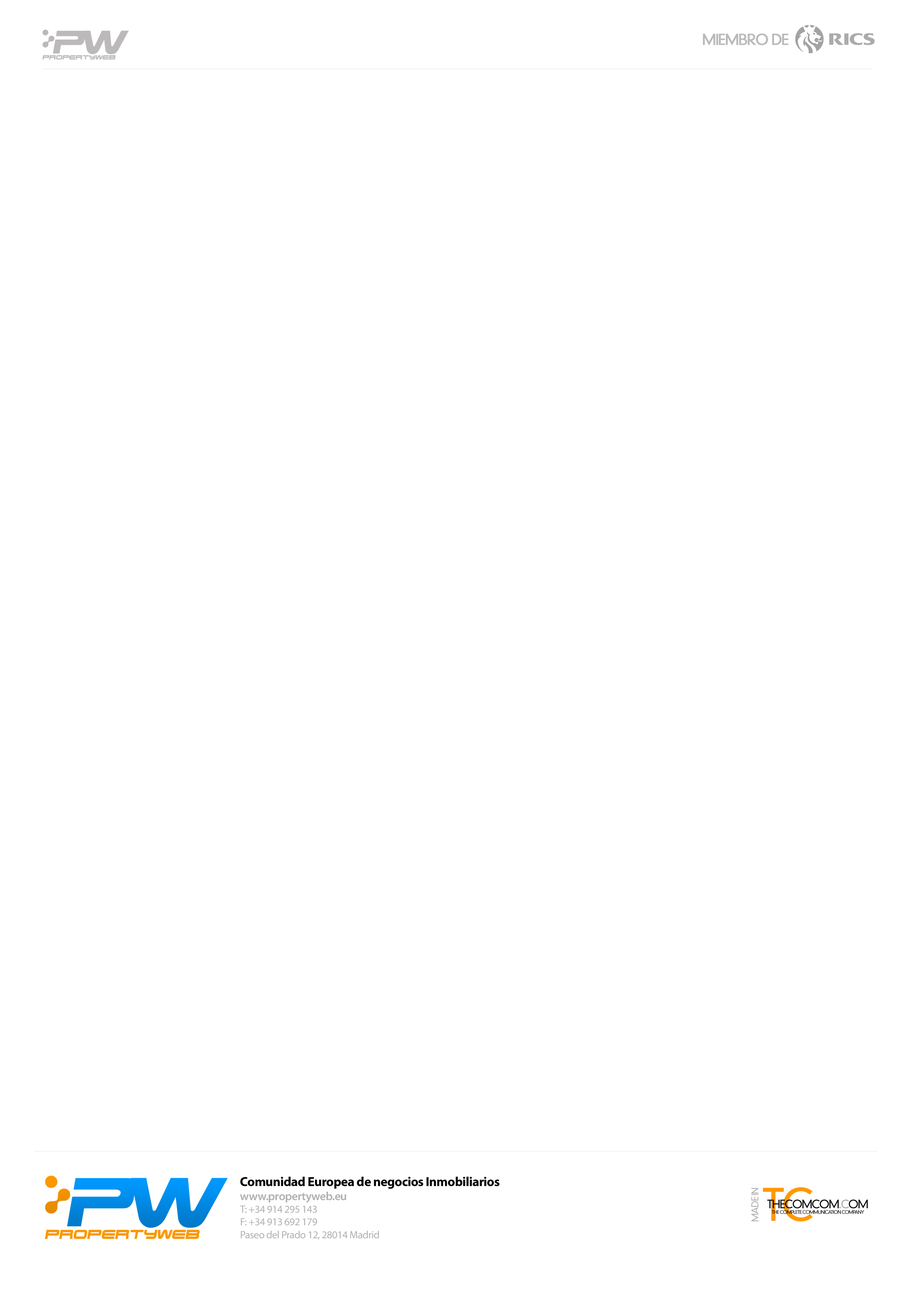
<style>
.page{position:relative;width:918px;height:1299px;background:#ffffff}
.page>*{position:absolute;margin:0}
.t1{font:14.7px "DINNeuzeitGroteskStd-Light";letter-spacing:-0.075em;color:#bbb9b9;text-transform:uppercase;font-weight:bold}
.t2{font:10.5px "MyriadPro-Regular";letter-spacing:-0.025em;color:#b0b0b0}
.t3{font:13.2px "MyriadPro-Bold";letter-spacing:-0.025em;color:#010101}
.t4{font:11.9px "MyriadPro-Semibold";letter-spacing:-0.025em;color:#b0b0b0}
.t5{font:9.3px "DINNeuzeitGroteskStd-Light";letter-spacing:-0.075em;color:#aeadad;text-transform:uppercase}
.t6{font:43.5px "DINNeuzeitGroteskStd-Light";letter-spacing:-0.075em;color:#ff9900;text-transform:uppercase}
.t7{font:4.7px "DINNeuzeitGroteskStd-Light";letter-spacing:-0.075em;color:#050505;text-transform:uppercase}
.t8{font:11.3px "DINNeuzeitGroteskStd-Light";letter-spacing:-0.075em;color:#050505;text-transform:uppercase}
.t9{font:11.3px "DINNeuzeitGroteskStd-Light";letter-spacing:-0.075em;color:#ff9900;text-transform:uppercase}
</style>
<div class="page">
<p class="t1" style="left:703px;top:33px;width:86px;height:12px">miembro de</p>
<p class="t2" style="left:240px;top:1176px;width:260px;height:64px"><span class="t3">Comunidad Europea de negocios Inmobiliarios<br></span><span class="t4">www.propertyweb.eu<br></span>T: +34 914 295 143<br>F: +34 913 692 179<br>Paseo del Prado 12, 28014 Madrid</p>
<p class="t5" style="left:751px;top:1188px;width:8px;height:33px;rotate:-90deg">made in</p>
<p class="t6" style="left:763px;top:1187px;width:50px;height:34px">TC</p>
<p class="t7" style="left:767px;top:1199px;width:101px;height:15px;text-align:center"><span class="t8">THECOMCOM</span><span class="t9">.C</span><span class="t8">OM<br></span>THE COMPLETE COMMUNICATION COMPANY</p>
</div>
